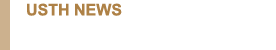
<style>
.page{position:relative;width:276px;height:50px;background:#ffffff}
.page>*{position:absolute;margin:0}
.t1{font:16px "Arial-BoldMT";color:#ae8146}
</style>
<div class="page">
<p class="t1" style="left:27px;top:3px;width:95px;height:13px">USTH NEWS</p>
</div>
